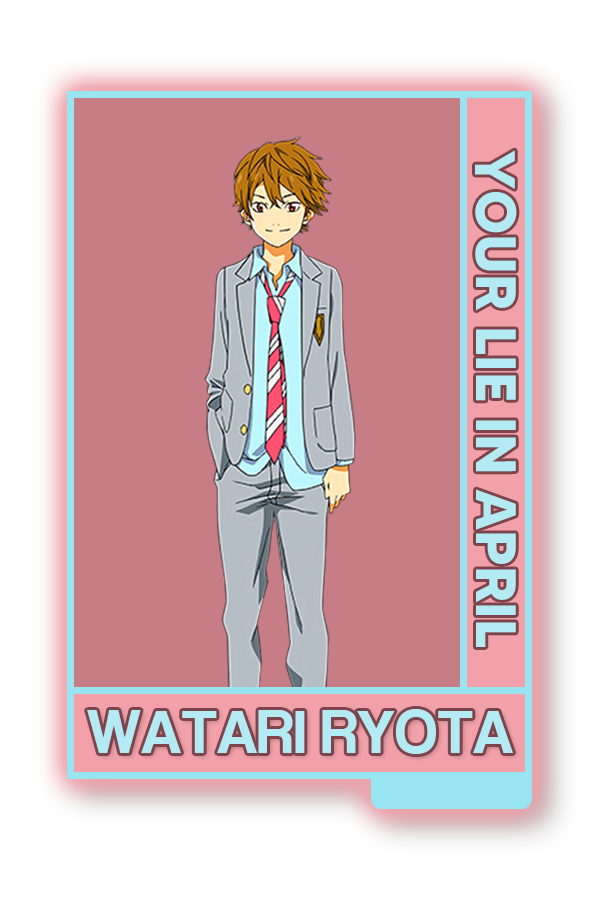
<style>
.page{position:relative;width:600px;height:900px;background:#c77d85}
.page>*{position:absolute;margin:0}
.t1{font:56.7px "MADETOMMY-Bold";color:#b3eaf4}
.t2{font:63.2px "CoolveticaRg-Regular";color:#b3eaf4}
</style>
<div class="page">
<p class="t1" style="left:475px;top:150px;width:42px;height:497px;rotate:90deg">YOUR LIE IN APRIL</p>
<p class="t2" style="left:87px;top:709px;width:426px;height:45px">WATARI RYOTA</p>
</div>
